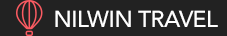
<style>
.page{position:relative;width:227px;height:36px;background:#222222}
.page>*{position:absolute;margin:0}
.t1{font:23px "Avenir-Medium";letter-spacing:-0.025em;color:#ffffff;text-transform:uppercase}
</style>
<div class="page">
<p class="t1" style="left:55px;top:10px;width:163px;height:17px">NilWIn Travel</p>
</div>
